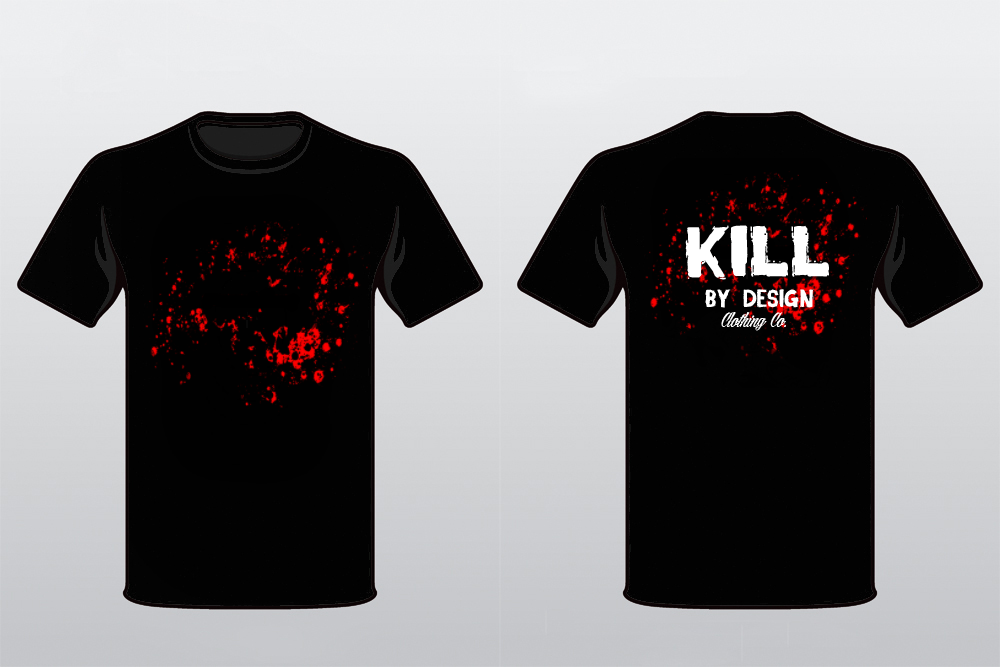
<style>
.page{position:relative;width:1000px;height:667px;background:#020202}
.page>*{position:absolute;margin:0}
.t1{font:100px "DeadFontWalking";color:#ffffff}
.t2{font:75px "HarbellPersonalUseOnly";color:#ffffff}
.t3{font:25px "DeadFontWalking";color:#ffffff}
.t4{font:16.7px "DeadFontWalking";color:#ffffff}
.t5{font:16.7px "AngillaTattooPersonalUse";color:#ffffff}
</style>
<div class="page">
<p class="t1" style="left:685px;top:225px;width:144px;height:55px"><span class="t2"> </span>kill</p>
<p class="t3" style="left:705px;top:289px;width:109px;height:19px"><span class="t4"> </span>  BY  DESIGN</p>
<p class="t5" style="left:721px;top:312px;width:65px;height:19px">Clothing Co.</p>
</div>
